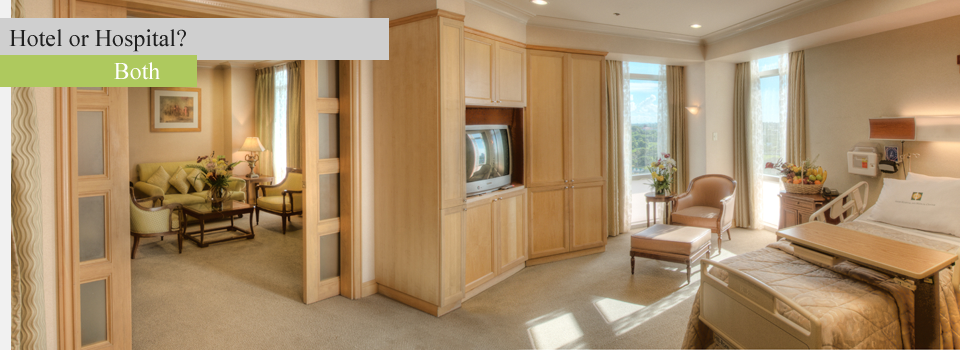
<style>
.page{position:relative;width:960px;height:350px}
.page>*{position:absolute;margin:0}
.t1{font:24px "TimesNewRomanPSMT";color:#1f1f1f}
.t2{font:24px "TimesNewRomanPSMT";color:#ffffff}
</style>
<div class="page">
<p class="t1" style="left:9px;top:29px;width:177px;height:23px">Hotel or Hospital?</p>
<p class="t2" style="left:114px;top:62px;width:46px;height:18px">Both</p>
</div>
